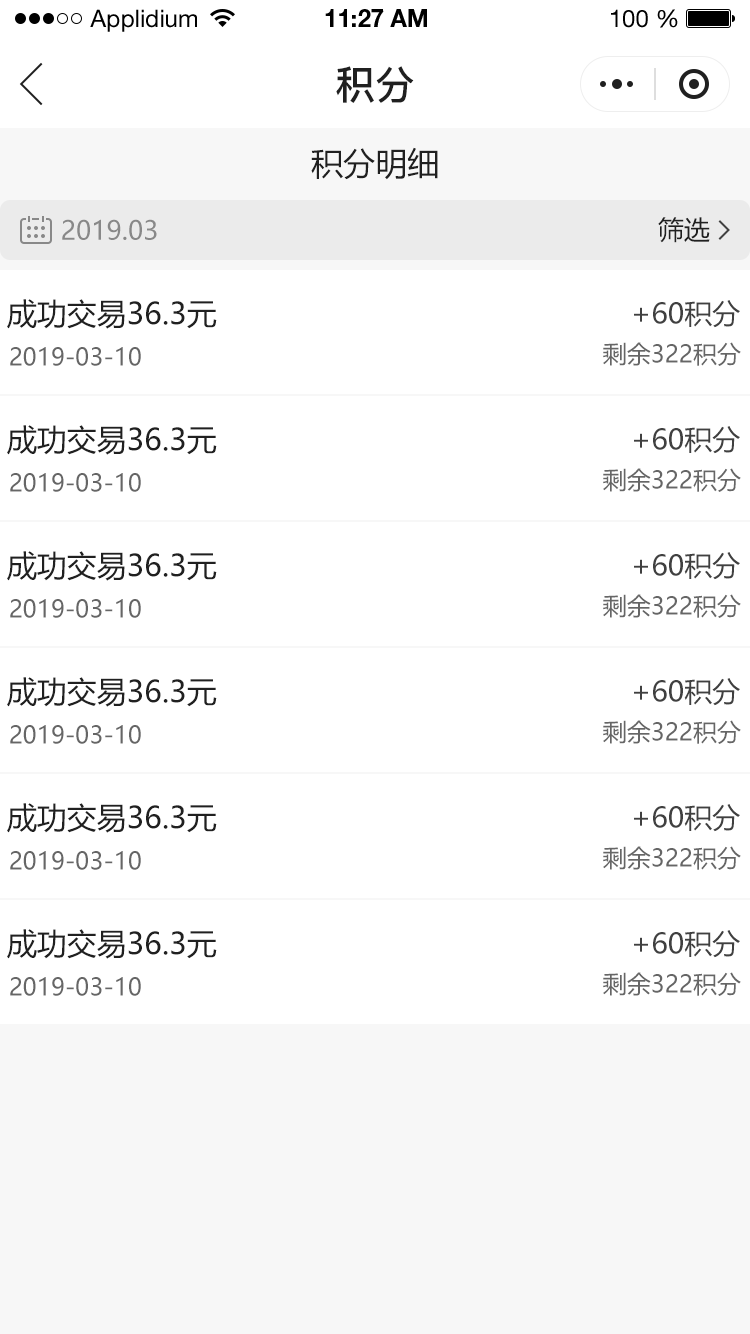
<style>
.page{position:relative;width:750px;height:1334px;background:#ffffff}
.page>*{position:absolute;margin:0}
.t1{font:24px "HelveticaNeueLTStd-Roman";color:#000000}
.t2{font:24px "HelveticaNeueLTStd-Bd";color:#000000}
.t3{font:40px "PingFang-SC-Bold";color:#202020;text-transform:uppercase}
.t4{font:32px "MicrosoftYaHei";color:#202020;text-transform:uppercase}
.t5{font:26px "MicrosoftYaHei";color:#888888;text-transform:uppercase}
.t6{font:26px "MicrosoftYaHei";color:#202020;text-transform:uppercase}
.t7{font:30px "MicrosoftYaHei";color:#202020;text-transform:uppercase}
.t8{font:28px "MicrosoftYaHei";color:#404040;text-transform:uppercase}
.t9{font:24px "MicrosoftYaHei";color:#666666;text-transform:uppercase}
</style>
<div class="page">
<p class="t1" style="left:90px;top:9px;width:107px;height:23px">Applidium</p>
<p class="t2" style="left:325px;top:9px;width:102px;height:18px">11:27 AM</p>
<p class="t1" style="left:611px;top:9px;width:67px;height:19px">100 %</p>
<p class="t3" style="left:336px;top:66px;width:78px;height:37px">积分</p>
<p class="t4" style="left:311px;top:147px;width:127px;height:33px">积分明细</p>
<p class="t5" style="left:62px;top:219px;width:95px;height:21px">2019.03</p>
<p class="t6" style="left:658px;top:217px;width:52px;height:26px">筛选</p>
<p class="t7" style="left:7px;top:299px;width:210px;height:30px">成功交易36.3元</p>
<p class="t8" style="left:634px;top:300px;width:106px;height:28px">+60积分</p>
<p class="t9" style="left:603px;top:342px;width:138px;height:24px">剩余322积分</p>
<p class="t9" style="left:10px;top:347px;width:131px;height:19px">2019-03-10</p>
<p class="t7" style="left:7px;top:425px;width:210px;height:30px">成功交易36.3元</p>
<p class="t8" style="left:634px;top:426px;width:106px;height:28px">+60积分</p>
<p class="t9" style="left:10px;top:473px;width:131px;height:19px">2019-03-10</p>
<p class="t9" style="left:603px;top:468px;width:138px;height:24px">剩余322积分</p>
<p class="t7" style="left:7px;top:551px;width:210px;height:30px">成功交易36.3元</p>
<p class="t8" style="left:634px;top:552px;width:106px;height:28px">+60积分</p>
<p class="t9" style="left:10px;top:599px;width:131px;height:19px">2019-03-10</p>
<p class="t9" style="left:603px;top:594px;width:138px;height:24px">剩余322积分</p>
<p class="t7" style="left:7px;top:677px;width:210px;height:30px">成功交易36.3元</p>
<p class="t8" style="left:634px;top:678px;width:106px;height:28px">+60积分</p>
<p class="t9" style="left:10px;top:725px;width:131px;height:19px">2019-03-10</p>
<p class="t9" style="left:603px;top:720px;width:138px;height:24px">剩余322积分</p>
<p class="t7" style="left:7px;top:803px;width:210px;height:30px">成功交易36.3元</p>
<p class="t8" style="left:634px;top:804px;width:106px;height:28px">+60积分</p>
<p class="t9" style="left:603px;top:846px;width:138px;height:24px">剩余322积分</p>
<p class="t9" style="left:10px;top:851px;width:131px;height:19px">2019-03-10</p>
<p class="t7" style="left:7px;top:929px;width:210px;height:30px">成功交易36.3元</p>
<p class="t8" style="left:634px;top:930px;width:106px;height:28px">+60积分</p>
<p class="t9" style="left:10px;top:977px;width:131px;height:19px">2019-03-10</p>
<p class="t9" style="left:603px;top:972px;width:138px;height:24px">剩余322积分</p>
</div>
